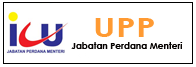
<style>
.page{position:relative;width:196px;height:67px;background:#ffffff}
.page>*{position:absolute;margin:0}
.t1{font:27px "CenturyGothic-Bold";color:#ff9a32;scale:1.31 1}
.t2{font:9px "CenturyGothic-Bold";color:#050100}
</style>
<div class="page">
<p class="t1" style="left:95px;top:18px;width:59px;height:19px">UPP</p>
<p class="t2" style="left:71px;top:42px;width:112px;height:7px">Jabatan Perdana Menteri</p>
</div>
